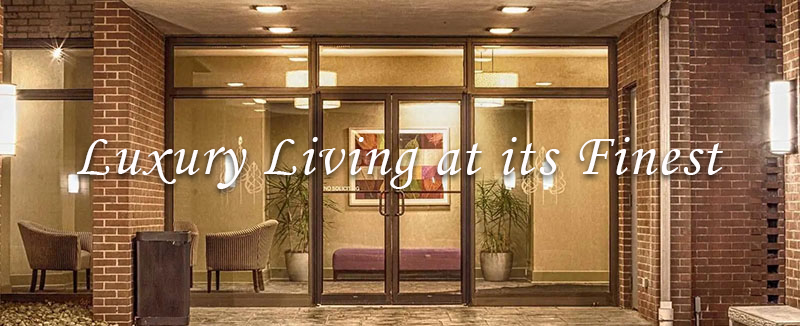
<style>
.page{position:relative;width:800px;height:326px}
.page>*{position:absolute;margin:0}
.t1{font:60px "MonotypeCorsiva";letter-spacing:0.04em;color:#fefbfb}
</style>
<div class="page">
<p class="t1" style="left:76px;top:137px;width:647px;height:52px">Luxury Living at its Finest</p>
</div>
